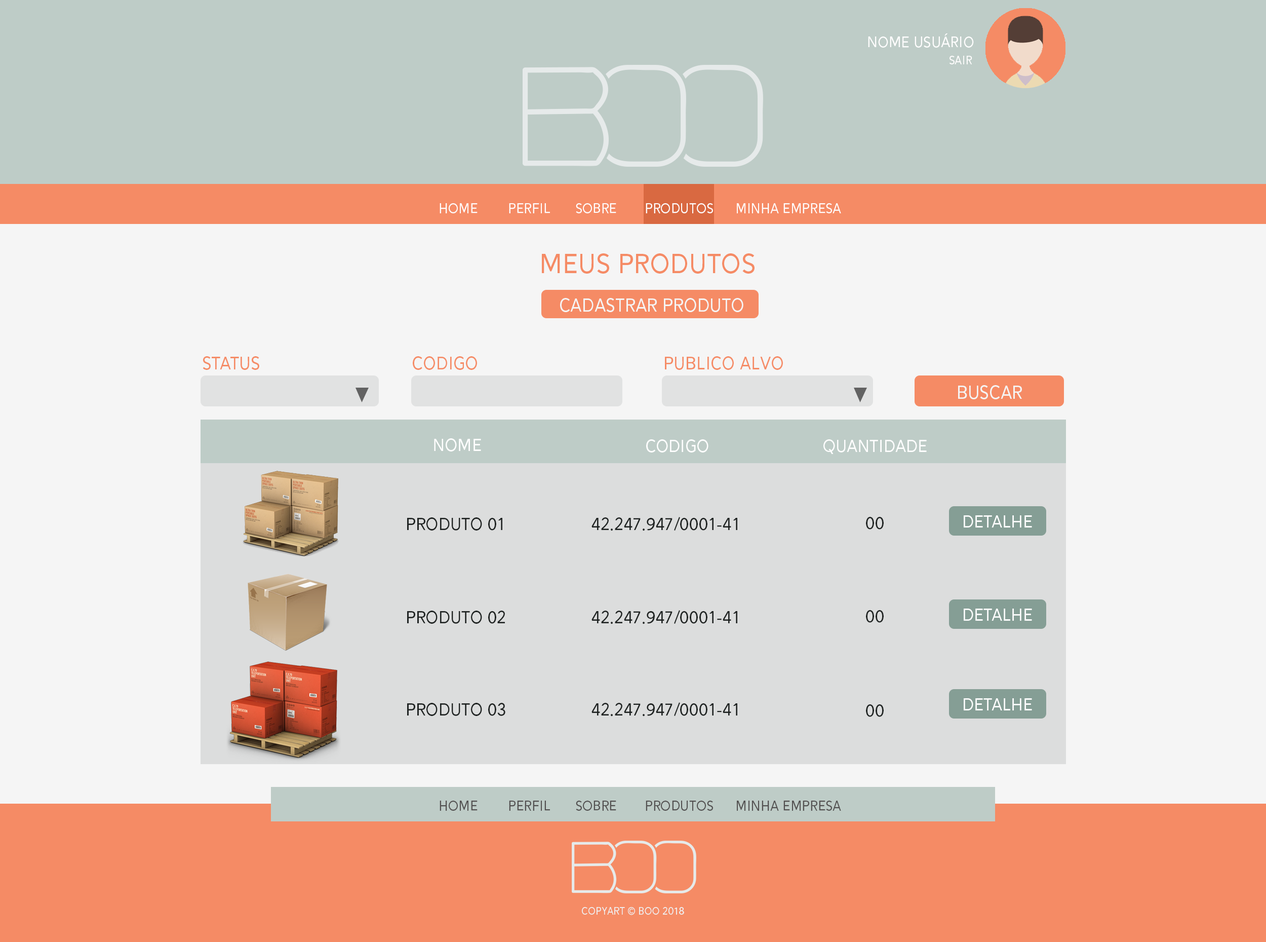
<style>
.page{position:relative;width:1266px;height:942px;background:#f5f5f5}
.page>*{position:absolute;margin:0}
.t1{font:18.3px "Alesand-Regular";color:#fffefe}
.t2{font:14.1px "Alesand-Regular";color:#fffefe}
.t3{font:16.9px "Alesand-Regular";color:#fffefe}
.t4{font:33.8px "Alesand-Regular";color:#f58b65}
.t5{font:22.4px "Alesand-Regular";color:#f5f5f5}
.t6{font:21.9px "Alesand-Regular";color:#f58b65}
.t7{font:21.1px "Alesand-Regular";color:#ffffff}
.t8{font:21.1px "Alesand-Regular";color:#1f2322}
.t9{font:21.1px "Alesand-Regular";color:#fefefe}
.t10{font:16.9px "Alesand-Regular";color:#525050}
.t11{font:12.7px "Alesand-Regular";color:#efefef}
</style>
<div class="page">
<p class="t1" style="left:868px;top:33px;width:106px;height:15px">Nome Usuário</p>
<p class="t2" style="left:950px;top:56px;width:23px;height:9px">Sair</p>
<p class="t3" style="left:440px;top:203px;width:38px;height:10px">HOME</p>
<p class="t3" style="left:509px;top:203px;width:41px;height:10px">PERFIL</p>
<p class="t3" style="left:576px;top:203px;width:40px;height:10px">SOBRE</p>
<p class="t3" style="left:646px;top:203px;width:67px;height:10px">PRODUTOS</p>
<p class="t3" style="left:737px;top:203px;width:104px;height:10px">MINHA EMPRESA</p>
<p class="t4" style="left:542px;top:253px;width:213px;height:21px">MEUS PRODUTOS</p>
<p class="t5" style="left:560px;top:298px;width:184px;height:14px">CADASTRAR PRODUTO</p>
<p class="t6" style="left:203px;top:356px;width:56px;height:14px">STATUS</p>
<p class="t6" style="left:413px;top:356px;width:64px;height:14px">cODIGO</p>
<p class="t6" style="left:665px;top:356px;width:118px;height:14px">PUBLICO ALVO</p>
<p class="t5" style="left:958px;top:385px;width:64px;height:14px">BUSCAR</p>
<p class="t7" style="left:434px;top:438px;width:47px;height:13px">nOME</p>
<p class="t7" style="left:646px;top:439px;width:63px;height:13px">CODIGO</p>
<p class="t7" style="left:824px;top:439px;width:103px;height:15px">quantidade</p>
<p class="t8" style="left:407px;top:517px;width:95px;height:13px">produto 01</p>
<p class="t8" style="left:592px;top:517px;width:146px;height:14px">42.247.947/0001-41</p>
<p class="t8" style="left:866px;top:517px;width:18px;height:12px">00</p>
<p class="t9" style="left:964px;top:515px;width:68px;height:12px">DETALHE</p>
<p class="t8" style="left:407px;top:610px;width:98px;height:14px">produto 02</p>
<p class="t8" style="left:592px;top:610px;width:146px;height:14px">42.247.947/0001-41</p>
<p class="t8" style="left:866px;top:610px;width:18px;height:13px">00</p>
<p class="t9" style="left:964px;top:608px;width:68px;height:13px">DETALHE</p>
<p class="t9" style="left:964px;top:698px;width:68px;height:12px">DETALHE</p>
<p class="t8" style="left:407px;top:703px;width:99px;height:13px">produto 03</p>
<p class="t8" style="left:592px;top:702px;width:146px;height:14px">42.247.947/0001-41</p>
<p class="t8" style="left:866px;top:704px;width:18px;height:13px">00</p>
<p class="t10" style="left:440px;top:800px;width:38px;height:10px">HOME</p>
<p class="t10" style="left:509px;top:800px;width:41px;height:10px">PERFIL</p>
<p class="t10" style="left:576px;top:800px;width:40px;height:10px">SOBRE</p>
<p class="t10" style="left:646px;top:800px;width:67px;height:10px">PRODUTOS</p>
<p class="t10" style="left:737px;top:800px;width:104px;height:10px">MINHA EMPRESA</p>
<p class="t11" style="left:582px;top:907px;width:102px;height:8px">copyart © boo 2018</p>
</div>
